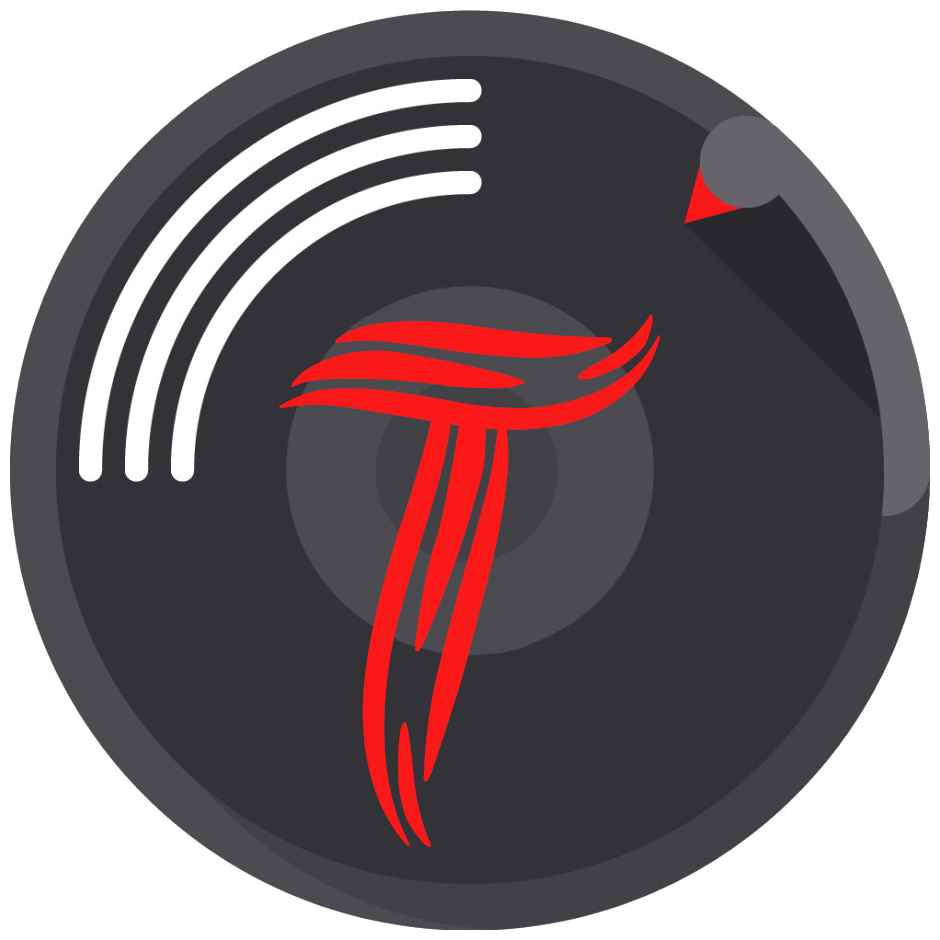
<style>
.page{position:relative;width:940px;height:940px;background:#333237}
.page>*{position:absolute;margin:0}
.t1{font:713px "Akronim-Regular";color:#f91919}
</style>
<div class="page">
<p class="t1" style="left:279px;top:314px;width:381px;height:533px">T</p>
</div>
